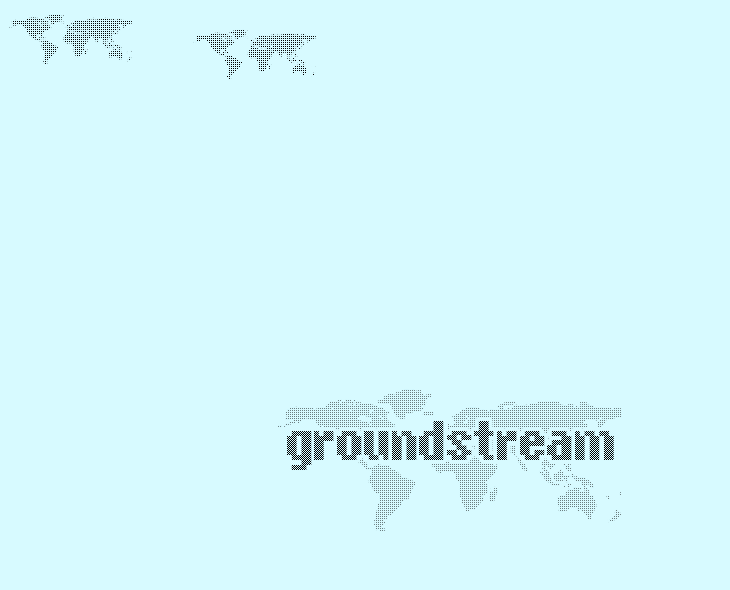
<style>
.page{position:relative;width:730px;height:590px;background:#d7faff}
.page>*{position:absolute;margin:0}
.t1{font:38.8px "Copy0865";letter-spacing:-0.04em}
</style>
<div class="page">
<p class="t1" style="left:287px;top:421px;width:327px;height:49px">groundstream</p>
</div>
